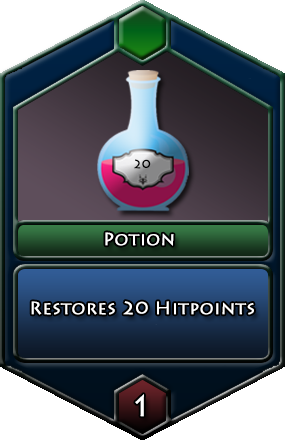
<style>
.page{position:relative;width:285px;height:440px}
.page>*{position:absolute;margin:0}
.t1{font:12px "LithosPro-Regular";color:#000000;font-weight:bold}
.t2{font:18px "LithosPro-Regular";color:#ffffff;font-weight:bold}
.t3{font:30px "LithosPro-Regular";color:#ffffff;font-weight:bold}
</style>
<div class="page">
<p class="t1" style="left:134px;top:159px;width:17px;height:10px">20</p>
<p class="t2" style="left:105px;top:232px;width:69px;height:14px">Potion</p>
<p class="t2" style="left:31px;top:301px;width:223px;height:14px">Restores 20 Hitpoints</p>
<p class="t3" style="left:135px;top:394px;width:9px;height:23px">1</p>
</div>
